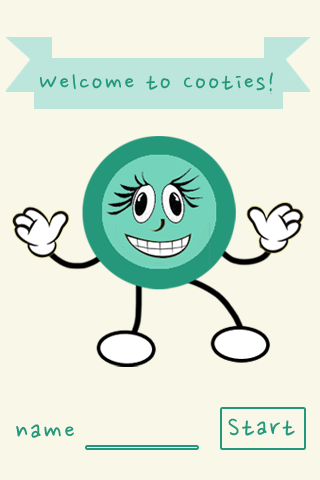
<style>
.page{position:relative;width:320px;height:480px;background:#f9f7e8}
.page>*{position:absolute;margin:0}
.t1{font:28px "NanumPen";letter-spacing:0.075em;color:#25987b}
.t2{font:30px "NanumPen";letter-spacing:0.075em;color:#24987b}
</style>
<div class="page">
<p class="t1" style="left:40px;top:72px;width:233px;height:20px">Welcome to Cooties!</p>
<p class="t2" style="left:16px;top:424px;width:58px;height:14px">name</p>
<p class="t2" style="left:228px;top:418px;width:67px;height:18px">Start</p>
</div>
